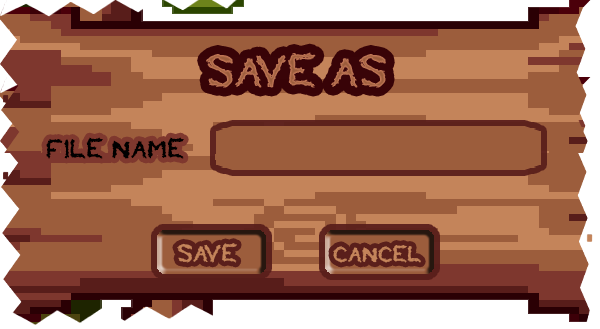
<style>
.page{position:relative;width:600px;height:329px;background:#9c5d3c}
.page>*{position:absolute;margin:0}
.t1{font:26px "TOBACCO";color:#000000;font-weight:bold}
.t2{font:24px "TOBACCO";color:#c4845a;font-weight:bold}
.t3{font:22px "TOBACCO";color:#c4845a;font-weight:bold}
</style>
<div class="page">
<p class="t1" style="left:46px;top:137px;width:138px;height:22px">FILE NAME</p>
<p class="t2" style="left:177px;top:243px;width:60px;height:20px">SAVE</p>
<p class="t3" style="left:333px;top:245px;width:88px;height:18px">CANCEL</p>
</div>
